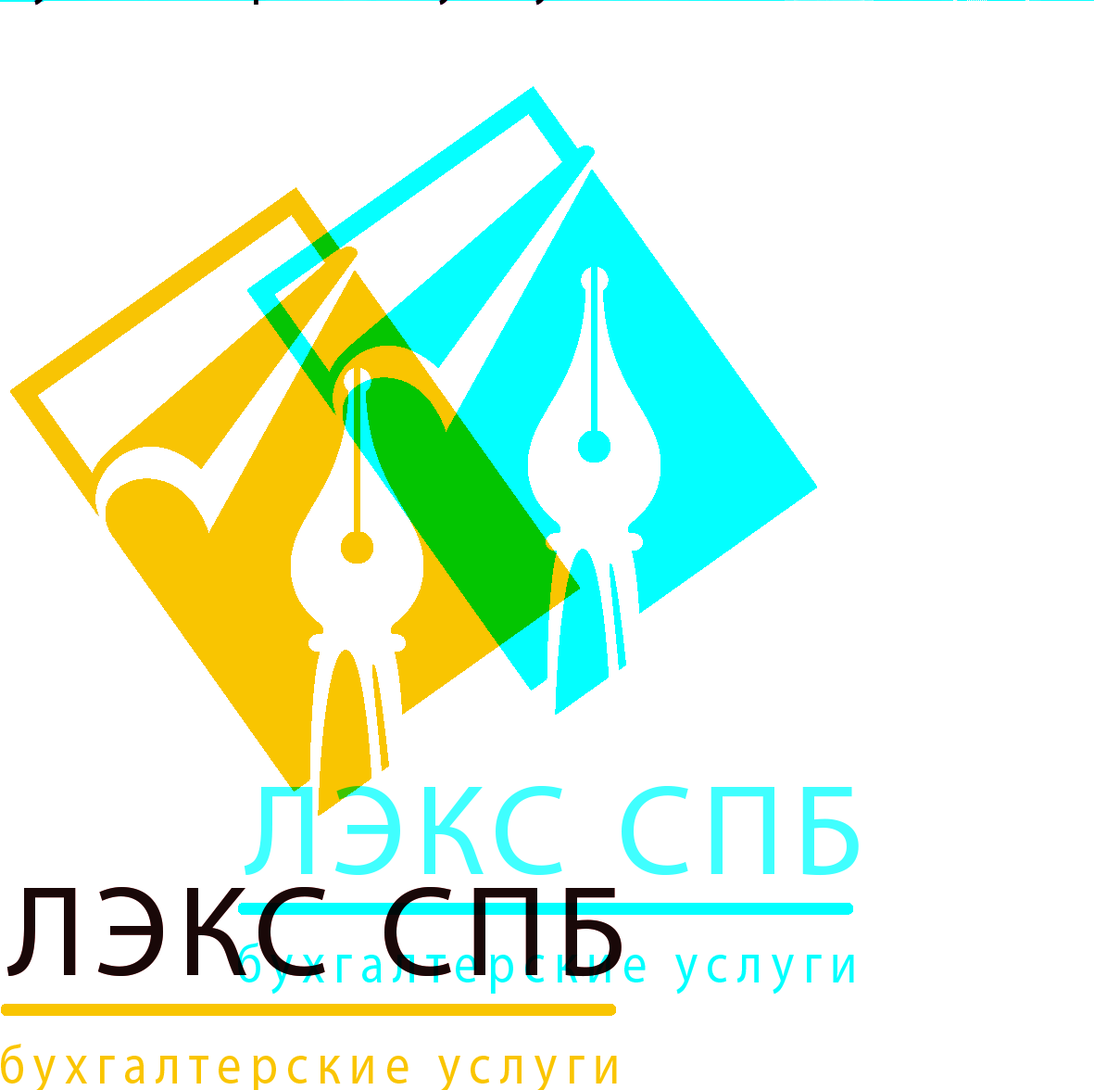
<style>
.page{position:relative;width:1094px;height:1090px;background:#ffffff}
.page>*{position:absolute;margin:0}
.t1{font:129.7px "MyriadPro-Regular";letter-spacing:0.07em;color:#40ffff}
.t2{font:55.5px "MyriadPro-Regular";letter-spacing:0.176em;color:#01ffff;scale:0.88 1}
</style>
<div class="page">
<p class="t1" style="left:244px;top:785px;width:615px;height:90px">ЛЭКС СПБ</p>
<p class="t2" style="left:238px;top:941px;width:616px;height:52px">бухгалтерские услуги</p>
</div>
